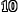
<style>
.page{position:relative;width:18px;height:12px;background:#ffffff}
.page>*{position:absolute;margin:0}
.t1{font:17px "Perpetua-Bold";color:#ffffff}
</style>
<div class="page">
<p class="t1" style="left:2px;top:1px;width:15px;height:10px">10</p>
</div>
